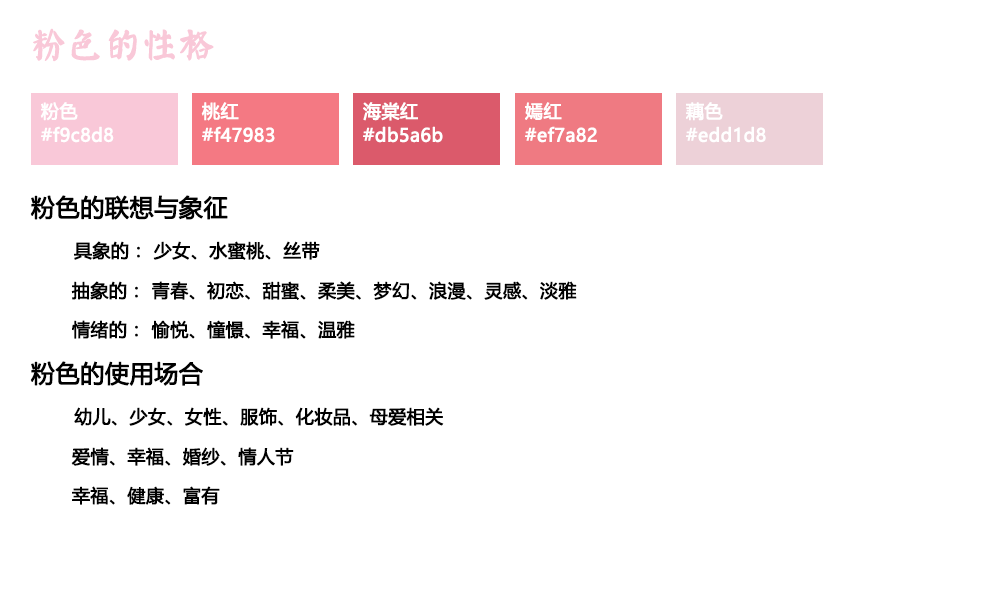
<style>
.page{position:relative;width:1000px;height:600px;background:#ffffff}
.page>*{position:absolute;margin:0}
.t1{font:36px "øów·»îów©I";color:#f9c8d8;font-weight:bold}
.t2{font:18px/24px "MicrosoftYaHei";color:#ffffff;font-weight:bold}
.t3{font:24px "MicrosoftYaHei";color:#000000;font-weight:bold}
.t4{font:18px "MicrosoftYaHei";color:#000000;font-weight:bold}
</style>
<div class="page">
<p class="t1" style="left:33px;top:28px;width:181px;height:34px">粉色的性格</p>
<p class="t2" style="left:40px;top:102px;width:74px;height:41px">粉色<br>#f9c8d8</p>
<p class="t2" style="left:201px;top:102px;width:74px;height:41px">桃红<br>#f47983</p>
<p class="t2" style="left:363px;top:102px;width:80px;height:41px">海棠红<br>#db5a6b</p>
<p class="t2" style="left:525px;top:102px;width:72px;height:41px">嫣红<br>#ef7a82</p>
<p class="t2" style="left:686px;top:102px;width:80px;height:41px">藕色<br>#edd1d8</p>
<p class="t3" style="left:30px;top:195px;width:198px;height:25px">粉色的联想与象征</p>
<p class="t4" style="left:74px;top:241px;width:246px;height:19px">具象的： 少女、水蜜桃、丝带</p>
<p class="t4" style="left:71px;top:281px;width:506px;height:19px">抽象的： 青春、初恋、甜蜜、柔美、梦幻、浪漫、灵感、淡雅</p>
<p class="t4" style="left:72px;top:320px;width:283px;height:19px">情绪的： 愉悦、憧憬、幸福、温雅</p>
<p class="t3" style="left:30px;top:361px;width:173px;height:25px">粉色的使用场合</p>
<p class="t4" style="left:74px;top:407px;width:370px;height:19px">幼儿、少女、女性、服饰、化妆品、母爱相关</p>
<p class="t4" style="left:71px;top:447px;width:223px;height:19px">爱情、幸福、婚纱、情人节</p>
<p class="t4" style="left:72px;top:486px;width:148px;height:19px">幸福、健康、富有</p>
</div>
